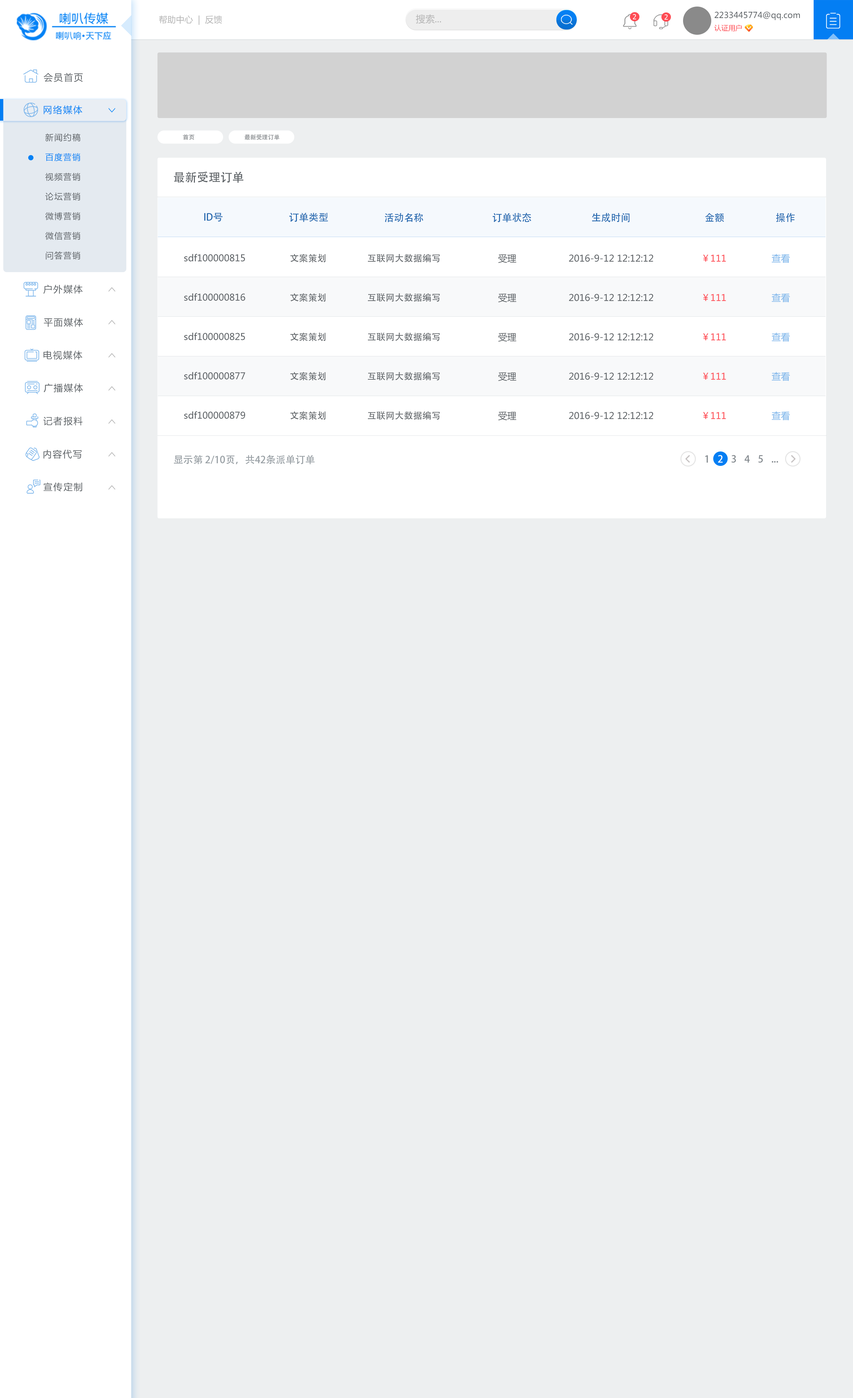
<style>
.page{position:relative;width:853px;height:1398px;background:#edeff0}
.page>*{position:absolute;margin:0}
.t1{font:8.6px "MicrosoftYaHei";color:#b4b4b4}
.t2{font:9.4px "MicrosoftYaHei";color:#b4b4b4}
.t3{font:6.9px "Tahoma";letter-spacing:0.1em;color:#ffffff;text-transform:uppercase}
.t4{font:8.2px/12.3px "MicrosoftYaHei";color:#5c6165}
.t5{font:7.1px/12.3px "MicrosoftYaHei";color:#fe4d55}
.t6{font:9.2px "MicrosoftYaHei";letter-spacing:0.1em;color:#5c6165}
.t7{font:9.2px "MicrosoftYaHei";letter-spacing:0.1em;color:#0582f5}
.t8{font:8.2px/19.7px "MicrosoftYaHei";letter-spacing:0.1em;color:#5c6165}
.t9{font:8.2px/19.7px "MicrosoftYaHei";letter-spacing:0.1em;color:#0381f5}
.t10{font:5.9px "AdobeHeitiStd-Regular";color:#878b8e}
.t11{font:11.8px "AdobeHeitiStd-Regular";color:#5c6165}
.t12{font:9.8px "AdobeHeitiStd-Regular";color:#276ab0;text-transform:uppercase}
.t13{font:9.2px/39.4px "MicrosoftYaHei";color:#5c6165}
.t14{font:9.2px/39.4px "AdobeHeitiStd-Regular";color:#5c6165}
.t15{font:9.2px/39.4px "MicrosoftYaHei";color:#fe4d55}
.t16{font:9.2px/39.4px "MicrosoftYaHei";color:#7db6eb}
.t17{font:9.8px "AdobeHeitiStd-Regular";color:#989fa4;text-transform:uppercase}
.t18{font:9.8px "AdobeHeitiStd-Regular";letter-spacing:0.8em;color:#83898e;text-transform:uppercase}
.t19{font:9.8px "AdobeHeitiStd-Regular";letter-spacing:0.8em;color:#feffff;text-transform:uppercase}
.t20{font:9.8px "AdobeHeitiStd-Regular";color:#83898e;text-transform:uppercase}
</style>
<div class="page">
<p class="t1" style="left:159px;top:15px;width:63px;height:10px">帮助中心  |  反馈</p>
<p class="t2" style="left:416px;top:14px;width:25px;height:10px">搜索...</p>
<p class="t3" style="left:633px;top:14px;width:3px;height:5px">2</p>
<p class="t3" style="left:664px;top:14px;width:4px;height:6px">2</p>
<p class="t4" style="left:714px;top:11px;width:86px;height:20px">2233445774@qq.com<br><span class="t5">认证用户</span></p>
<p class="t6" style="left:44px;top:73px;width:39px;height:9px">会员首页</p>
<p class="t7" style="left:44px;top:105px;width:38px;height:9px">网络媒体</p>
<p class="t8" style="left:45px;top:133px;width:35px;height:127px">新闻约稿<br><span class="t9">百度营销<br></span>视频营销<br>论坛营销<br>微博营销<br>微信营销<br>问答营销</p>
<p class="t10" style="left:183px;top:134px;width:11px;height:6px">首页</p>
<p class="t10" style="left:244px;top:134px;width:35px;height:6px">最新受理订单</p>
<p class="t11" style="left:174px;top:172px;width:69px;height:11px">最新受理订单</p>
<p class="t12" style="left:204px;top:213px;width:19px;height:9px">ID号</p>
<p class="t12" style="left:289px;top:213px;width:39px;height:9px">订单类型</p>
<p class="t12" style="left:384px;top:213px;width:39px;height:9px">活动名称</p>
<p class="t12" style="left:492px;top:213px;width:39px;height:9px">订单状态</p>
<p class="t12" style="left:592px;top:213px;width:37px;height:9px">生成时间</p>
<p class="t12" style="left:705px;top:213px;width:19px;height:9px">金额</p>
<p class="t12" style="left:776px;top:213px;width:19px;height:9px">操作</p>
<p class="t13" style="left:184px;top:254px;width:61px;height:165px">sdf100000815<br>sdf100000816<br>sdf100000825<br>sdf100000877<br>sdf100000879</p>
<p class="t14" style="left:290px;top:254px;width:36px;height:166px">文案策划<br>文案策划<br>文案策划<br>文案策划<br>文案策划</p>
<p class="t14" style="left:368px;top:254px;width:71px;height:166px">互联网大数据编写<br>互联网大数据编写<br>互联网大数据编写<br>互联网大数据编写<br>互联网大数据编写</p>
<p class="t13" style="left:498px;top:254px;width:18px;height:166px">受理<br>受理<br>受理<br>受理<br>受理</p>
<p class="t13" style="left:569px;top:254px;width:84px;height:165px">2016-9-12 12:12:12<br>2016-9-12 12:12:12<br>2016-9-12 12:12:12<br>2016-9-12 12:12:12<br>2016-9-12 12:12:12</p>
<p class="t15" style="left:703px;top:254px;width:23px;height:165px">￥111<br>￥111<br>￥111<br>￥111<br>￥111</p>
<p class="t16" style="left:771px;top:254px;width:19px;height:166px">查看<br>查看<br>查看<br>查看<br>查看</p>
<p class="t6" style="left:43px;top:285px;width:40px;height:9px">户外媒体</p>
<p class="t6" style="left:44px;top:318px;width:39px;height:9px">平面媒体</p>
<p class="t6" style="left:43px;top:351px;width:39px;height:9px">电视媒体</p>
<p class="t6" style="left:44px;top:383px;width:39px;height:10px">广播媒体</p>
<p class="t6" style="left:43px;top:417px;width:40px;height:9px">记者报料</p>
<p class="t6" style="left:43px;top:450px;width:39px;height:9px">内容代写</p>
<p class="t17" style="left:174px;top:455px;width:141px;height:9px">显示第 2/10页，共42条派单订单</p>
<p class="t18" style="left:705px;top:455px;width:73px;height:8px">1<span class="t19">2</span>345<span class="t20">...</span></p>
<p class="t6" style="left:43px;top:482px;width:39px;height:10px">宣传定制</p>
</div>
